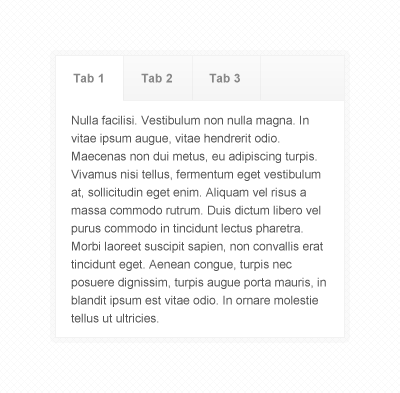
<style>
.page{position:relative;width:400px;height:393px;background:#ffffff}
.page>*{position:absolute;margin:0}
.t1{font:12px "Arial-BoldMT";color:#888888}
.t2{font:12px/18px "ArialMT";color:#555555}
</style>
<div class="page">
<p class="t1" style="left:73px;top:73px;width:167px;height:10px">Tab 1           Tab 2           Tab 3</p>
<p class="t2" style="left:71px;top:115px;width:255px;height:208px">Nulla facilisi. Vestibulum non nulla magna. In vitae ipsum augue, vitae hendrerit odio. Maecenas non dui metus, eu adipiscing turpis. Vivamus nisi tellus, fermentum eget vestibulum at, sollicitudin eget enim. Aliquam vel risus a massa commodo rutrum. Duis dictum libero vel purus commodo in tincidunt lectus pharetra. Morbi laoreet suscipit sapien, non convallis erat tincidunt eget. Aenean congue, turpis nec posuere dignissim, turpis augue porta mauris, in blandit ipsum est vitae odio. In ornare molestie tellus ut ultricies.</p>
</div>
